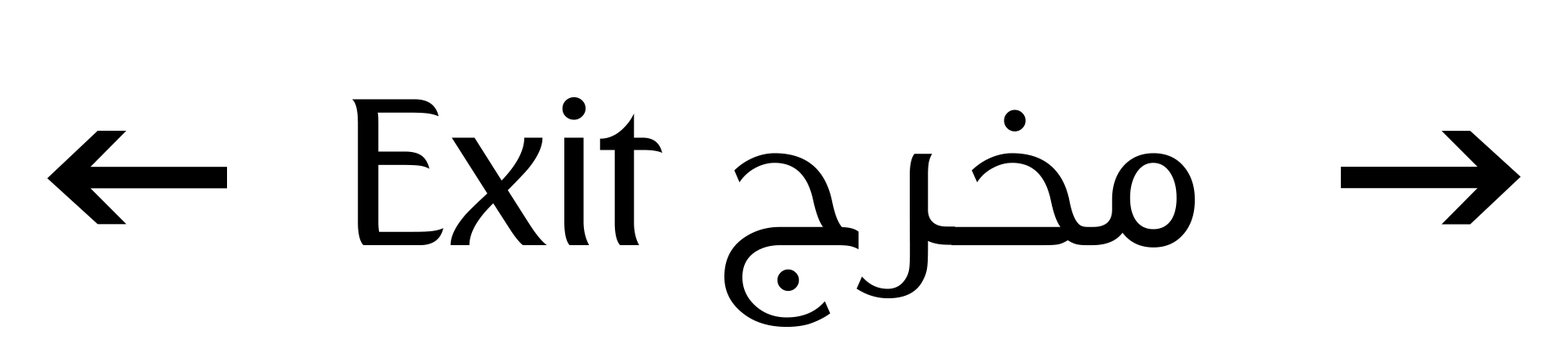
<style>
.page{position:relative;width:1568px;height:353px;background:#ffffff}
.page>*{position:absolute;margin:0}
.t1{font:204.2px "Emirates-Medium";color:#000000}
</style>
<div class="page">
<p class="t1" style="left:352px;top:97px;width:843px;height:230px">Exit مخرج</p>
</div>
